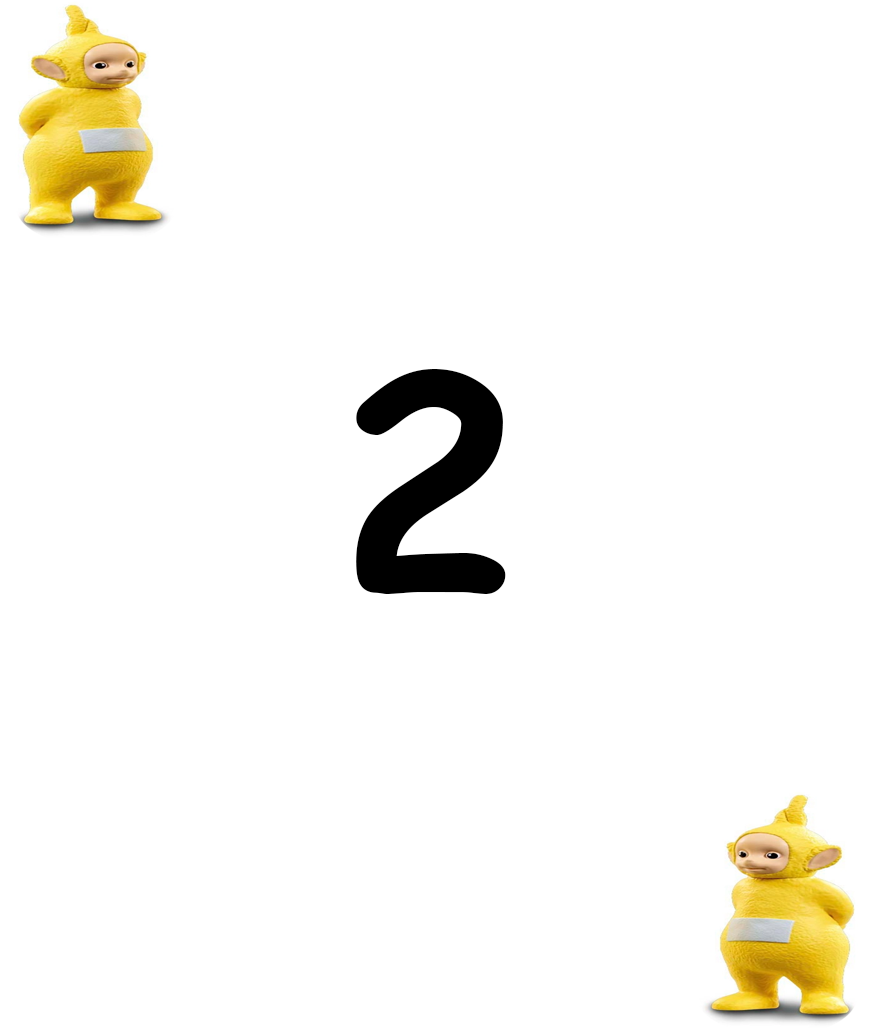
<style>
.page{position:relative;width:873px;height:1036px;background:#ffffff}
.page>*{position:absolute;margin:0}
.t1{font:300px "ComicSansMS-Bold";color:#000000;font-variant:small-caps}
</style>
<div class="page">
<p class="t1" style="left:356px;top:369px;width:150px;height:225px">2</p>
</div>
